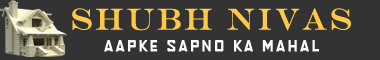
<style>
.page{position:relative;width:380px;height:60px;background:#333333}
.page>*{position:absolute;margin:0}
.t1{font:30px "EngraversMT";letter-spacing:0.075em;color:#ffc947;font-weight:bold;scale:0.93 1}
.t2{font:15.3px "AgencyFB-Reg";letter-spacing:0.05em;color:#fcfbf7;font-weight:bold;scale:1.56 1}
</style>
<div class="page">
<p class="t1" style="left:72px;top:8px;width:279px;height:23px">SHUBH NIVAS</p>
<p class="t2" style="left:104px;top:40px;width:215px;height:12px">AAPKE SAPNO KA MAHAL</p>
</div>
